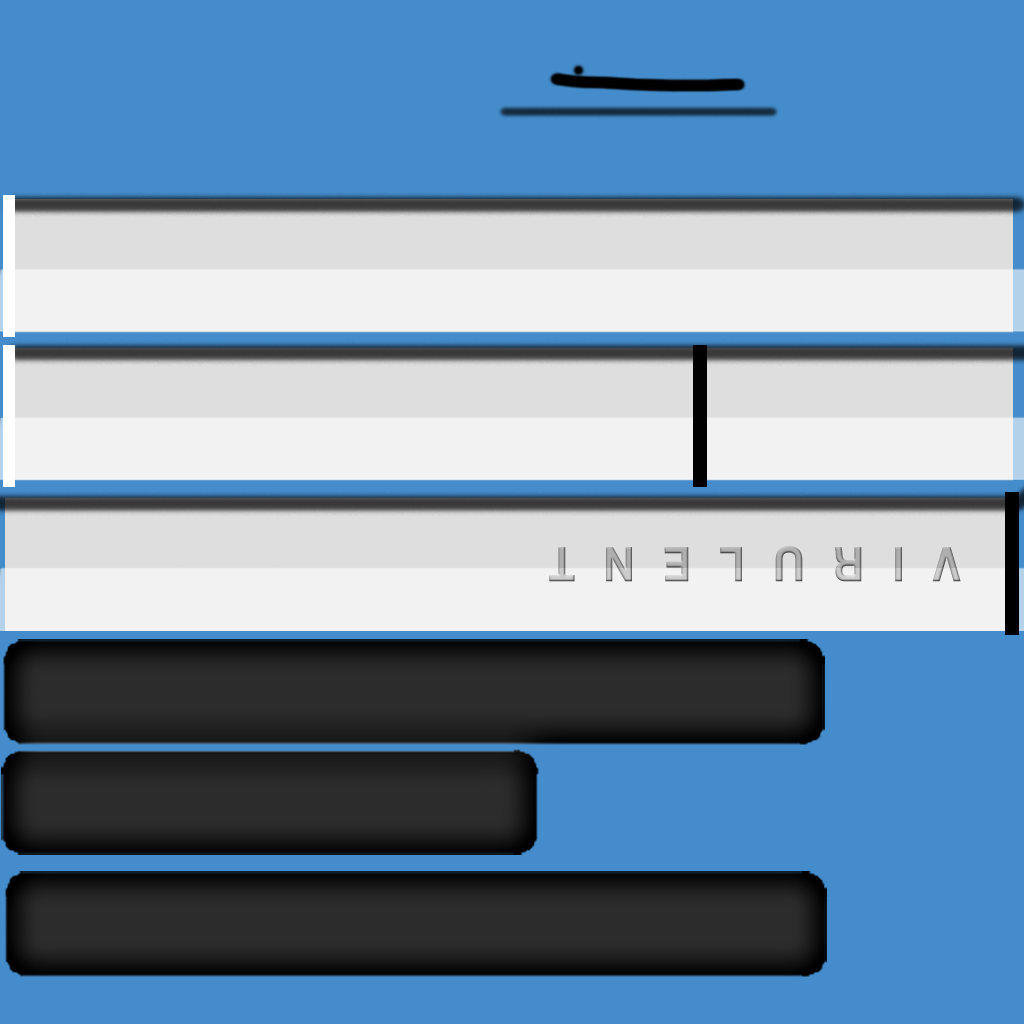
<style>
.page{position:relative;width:1024px;height:1024px;background:#448ccb}
.page>*{position:absolute;margin:0}
.t1{font:48px "HelveticaNeue-Bold";letter-spacing:0.65em;scale:0.9 1}
</style>
<div class="page">
<p class="t1" style="left:549px;top:546px;width:412px;height:36px;rotate:180deg">VIRULENT</p>
</div>
